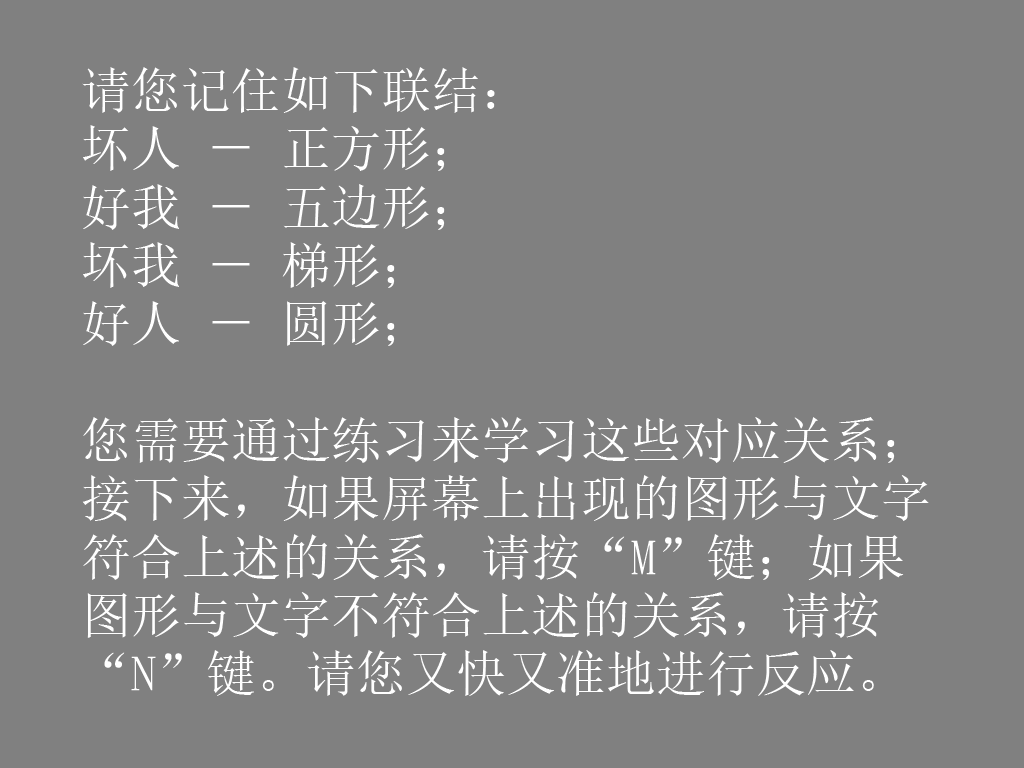
<style>
.page{position:relative;width:1024px;height:768px;background:#808080}
.page>*{position:absolute;margin:0}
.t1{font:50px/58.3px "SimSun";color:#ffffff}
</style>
<div class="page">
<p class="t1" style="left:82px;top:67px;width:847px;height:629px">请您记住如下联结： <br>坏人 － 正方形；<br>好我 － 五边形；<br>坏我 － 梯形；<br>好人 － 圆形；<br><br>您需要通过练习来学习这些对应关系；<br>接下来，如果屏幕上出现的图形与文字<br>符合上述的关系，请按“M”键；如果<br>图形与文字不符合上述的关系，请按<br>“N”键。请您又快又准地进行反应。</p>
</div>
